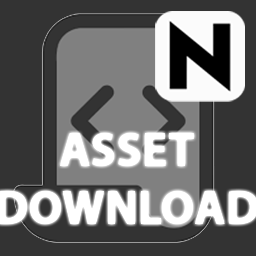
<style>
.page{position:relative;width:256px;height:256px;background:#333333}
.page>*{position:absolute;margin:0}
.t1{font:48px "MyriadPro-Bold";color:#ffffff}
</style>
<div class="page">
<p class="t1" style="left:0px;top:133px;width:258px;height:91px;text-align:center">ASSET<br>DOWNLOAD</p>
</div>
